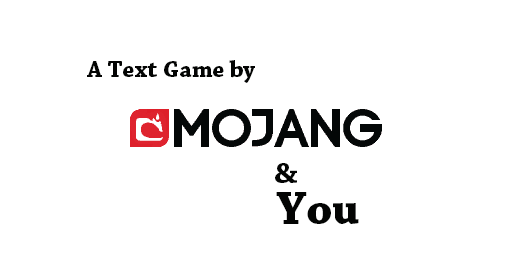
<style>
.page{position:relative;width:512px;height:256px;background:#ffffff}
.page>*{position:absolute;margin:0}
.t1{font:24px "ChaparralPro-Bold";color:#030403}
.t2{font:30px "ChaparralPro-Bold";color:#030403}
.t3{font:48px "ChaparralPro-Bold";color:#030403}
</style>
<div class="page">
<p class="t1" style="left:87px;top:60px;width:168px;height:23px">A Text Game by</p>
<p class="t2" style="left:275px;top:163px;width:22px;height:20px">&amp;</p>
<p class="t3" style="left:276px;top:192px;width:83px;height:32px">You</p>
</div>
